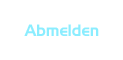
<style>
.page{position:relative;width:123px;height:60px;background:#ffffff}
.page>*{position:absolute;margin:0}
.t1{font:16px "AeroRegularSWFTE";color:#8bedff}
</style>
<div class="page">
<p class="t1" style="left:24px;top:24px;width:75px;height:12px">Abmelden</p>
</div>
